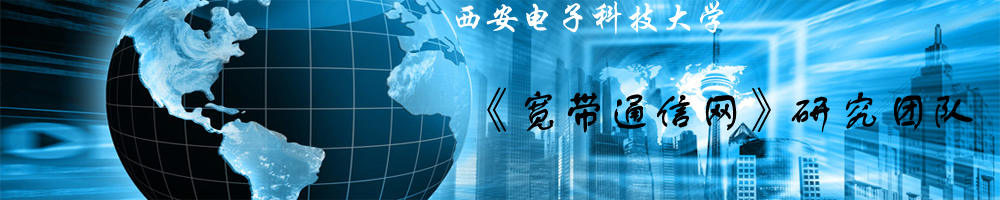
<style>
.page{position:relative;width:1000px;height:200px}
.page>*{position:absolute;margin:0}
.t1{font:35px "STXingkai";color:#ffffff}
.t2{font:46px "FZSTK--GBK1-0";color:#000000}
</style>
<div class="page">
<p class="t1" style="left:455px;top:0px;width:269px;height:35px">西安电子科技大学</p>
<p class="t2" style="left:487px;top:87px;width:486px;height:46px">《宽带通信网》研究团队</p>
</div>
